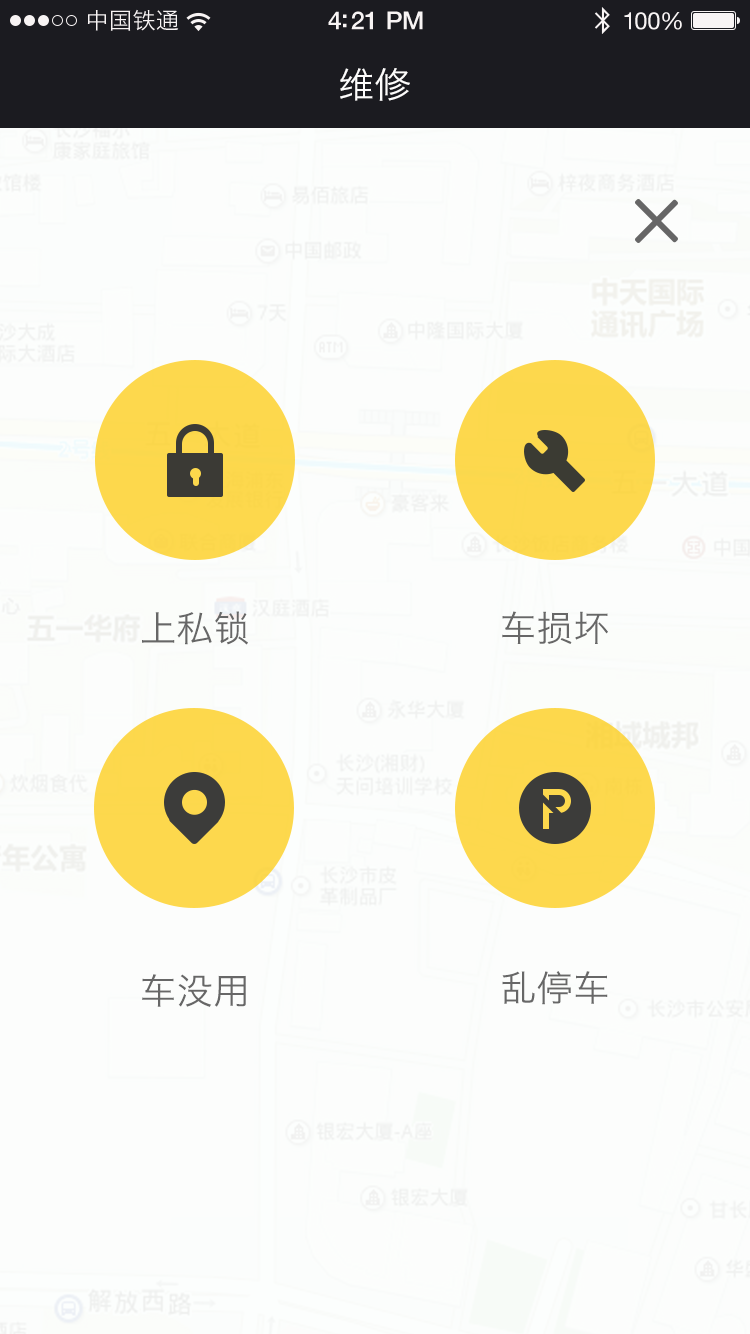
<style>
.page{position:relative;width:750px;height:1334px;background:#fcfdfc}
.page>*{position:absolute;margin:0}
.t1{font:23px "HiraginoSansGB-W3";letter-spacing:0.02em;color:#f8f4f4}
.t2{font:25px "HelveticaNeue-Medium";letter-spacing:-0.02em;color:#f8f4f4}
.t3{font:24px "HelveticaNeue";letter-spacing:-0.02em;color:#f8f4f4}
.t4{font:36px "HiraginoSansGB-W3";letter-spacing:0.02em;color:#fdfcfc}
.t5{font:36px "HiraginoSansGB-W3";letter-spacing:0.02em;color:#676767}
</style>
<div class="page">
<p class="t1" style="left:87px;top:9px;width:92px;height:22px">中国铁通</p>
<p class="t2" style="left:328px;top:11px;width:95px;height:19px">4:21 PM</p>
<p class="t3" style="left:624px;top:12px;width:58px;height:18px">100%</p>
<p class="t4" style="left:340px;top:68px;width:70px;height:33px">维修</p>
<p class="t5" style="left:142px;top:611px;width:106px;height:34px">上私锁</p>
<p class="t5" style="left:502px;top:611px;width:106px;height:33px">车损坏</p>
<p class="t5" style="left:142px;top:974px;width:104px;height:33px">车没用</p>
<p class="t5" style="left:502px;top:971px;width:106px;height:34px">乱停车</p>
</div>
